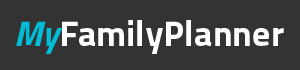
<style>
.page{position:relative;width:300px;height:70px;background:#333333}
.page>*{position:absolute;margin:0}
.t1{font:36px "Titillium-Bold";color:#ffffff}
.t2{font:36px "Titillium-BoldItalic";color:#00bcd4}
</style>
<div class="page">
<p class="t1" style="left:16px;top:20px;width:268px;height:34px"><span class="t2">My</span>FamilyPlanner</p>
</div>
